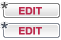
<style>
.page{position:relative;width:61px;height:40px;background:#ffffff}
.page>*{position:absolute;margin:0}
.t1{font:10.4px "Arial-BoldMT";color:#bc2a4d}
</style>
<div class="page">
<p class="t1" style="left:19px;top:7px;width:23px;height:8px">EDIT</p>
<p class="t1" style="left:19px;top:27px;width:23px;height:8px">EDIT</p>
</div>
